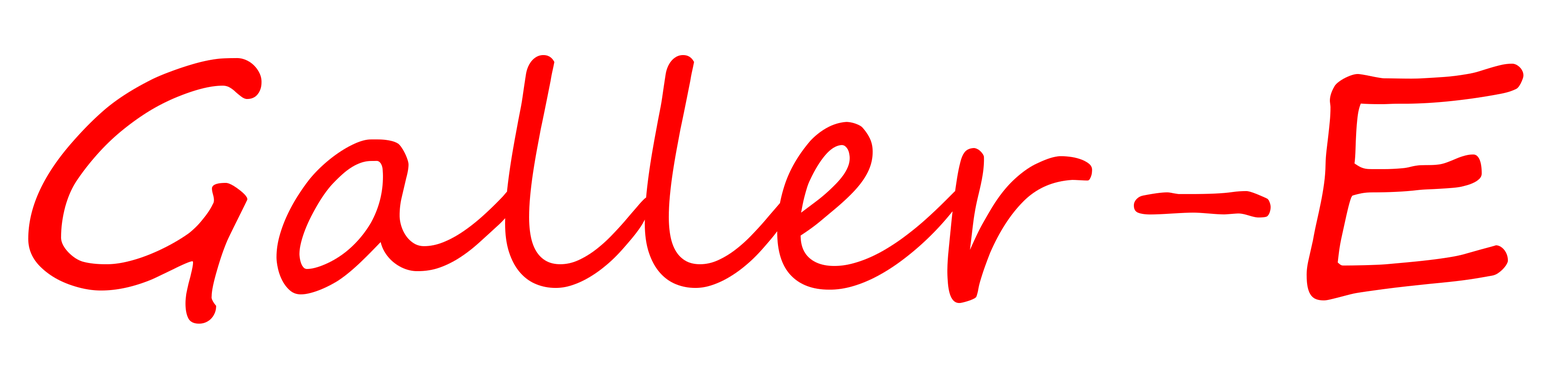
<style>
.page{position:relative;width:1568px;height:377px;background:#ffffff}
.page>*{position:absolute;margin:0}
.t1{font:315.2px "SegoeScript";color:#ff0000}
</style>
<div class="page">
<p class="t1" style="left:28px;top:55px;width:1496px;height:268px">Galler-E</p>
</div>
